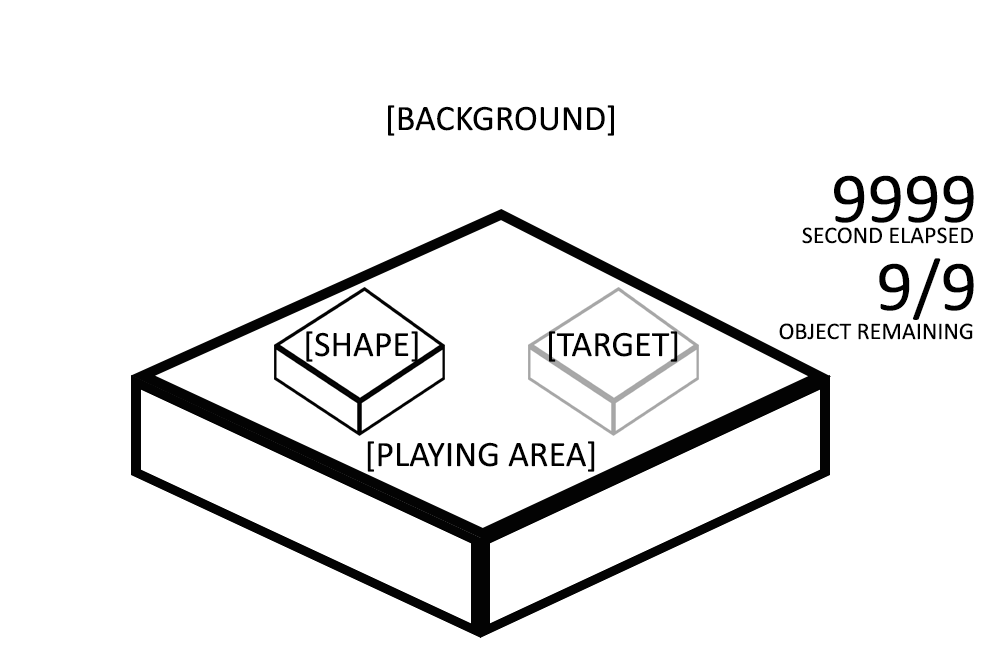
<style>
.page{position:relative;width:991px;height:672px;background:#ffffff}
.page>*{position:absolute;margin:0}
.t1{font:36px "Calibri";color:#000000}
.t2{font:72px "Calibri";color:#000000}
.t3{font:24px "Calibri";color:#000000}
</style>
<div class="page">
<p class="t1" style="left:388px;top:105px;width:226px;height:31px">[BACKGROUND]</p>
<p class="t2" style="left:834px;top:175px;width:140px;height:48px">9999</p>
<p class="t3" style="left:802px;top:227px;width:171px;height:17px">SECOND ELAPSED</p>
<p class="t2" style="left:879px;top:258px;width:95px;height:62px">9/9</p>
<p class="t3" style="left:779px;top:323px;width:194px;height:17px">OBJECT REMAINING</p>
<p class="t1" style="left:306px;top:331px;width:112px;height:31px">[SHAPE]</p>
<p class="t1" style="left:549px;top:331px;width:129px;height:31px">[TARGET]</p>
<p class="t1" style="left:367px;top:441px;width:228px;height:31px">[PLAYING AREA]</p>
</div>
